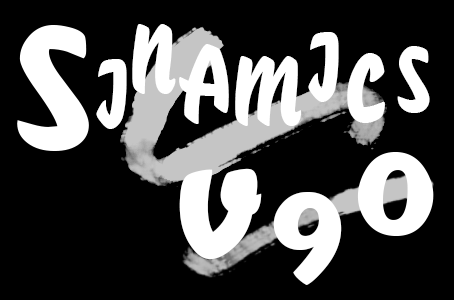
<style>
.page{position:relative;width:454px;height:300px;background:#000000}
.page>*{position:absolute;margin:0}
.t1{font:110.2px "QueenOfCorona";color:#ffffff;scale:0.76 1}
.t2{font:217.4px "QueenOfCorona";color:#ffffff;scale:0.95 1}
.t3{font:168.7px "QueenOfCorona";color:#ffffff;scale:0.91 1}
</style>
<div class="page">
<p class="t1" style="left:132px;top:24px;width:44px;height:70px">N</p>
<p class="t1" style="left:308px;top:32px;width:31px;height:70px">I</p>
<p class="t1" style="left:179px;top:44px;width:50px;height:80px">A</p>
<p class="t1" style="left:347px;top:53px;width:38px;height:70px">C</p>
<p class="t1" style="left:397px;top:46px;width:33px;height:67px">S</p>
<p class="t1" style="left:96px;top:59px;width:31px;height:70px">I</p>
<p class="t1" style="left:235px;top:56px;width:67px;height:70px">M</p>
<p class="t2" style="left:179px;top:168px;width:83px;height:92px;rotate:7deg">v</p>
<p class="t3" style="left:273px;top:192px;width:69px;height:93px">9</p>
</div>
